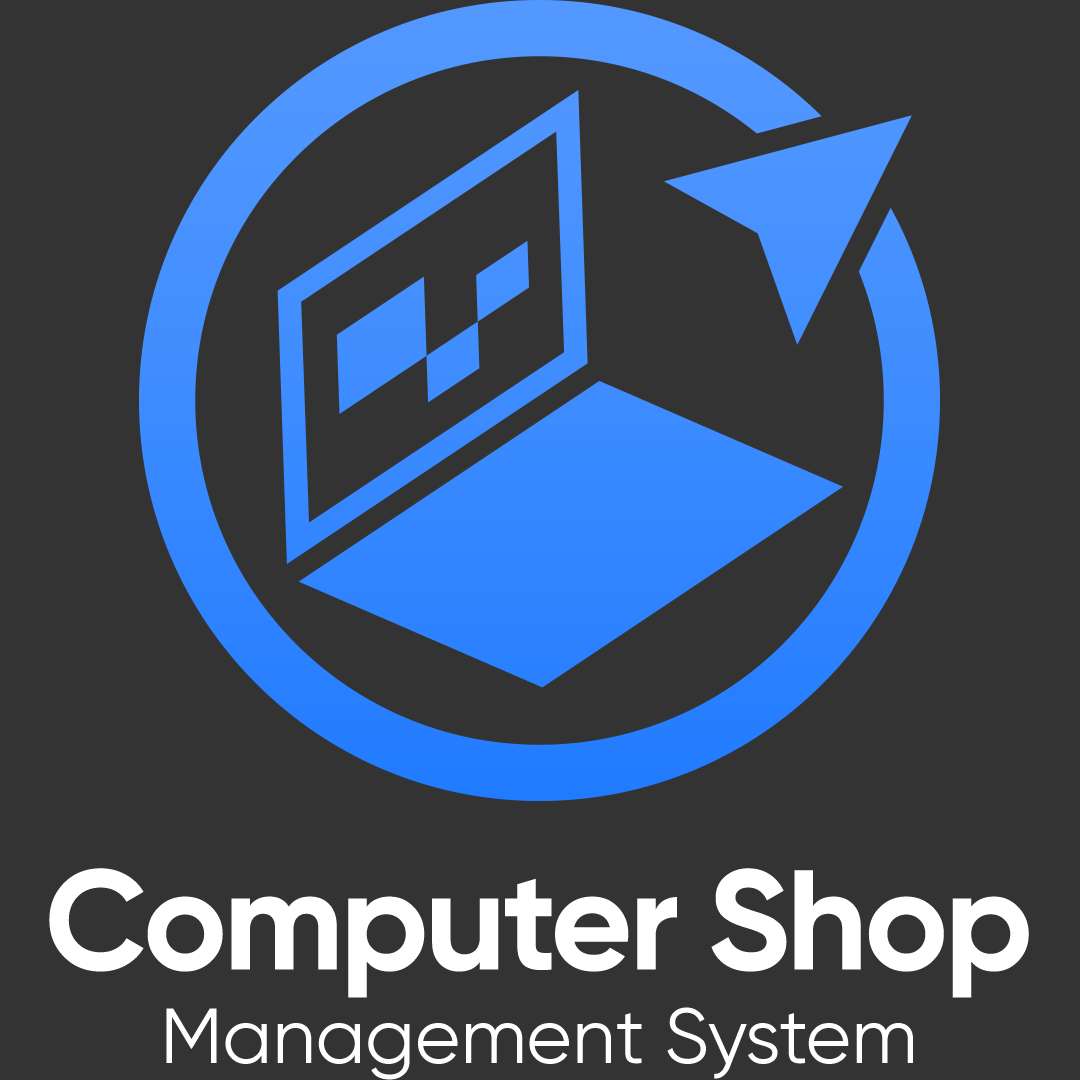
<style>
.page{position:relative;width:1080px;height:1080px;background:#333333}
.page>*{position:absolute;margin:0}
.t1{font:78px "Gilroy-Regular";color:#ffffff}
.t2{font:141.2px "Gilroy-Bold";letter-spacing:-0.025em;color:#ffffff}
</style>
<div class="page">
<p class="t1" style="left:49px;top:868px;width:980px;height:212px;text-align:center"><span class="t2">Computer Shop<br></span>Management System</p>
</div>
